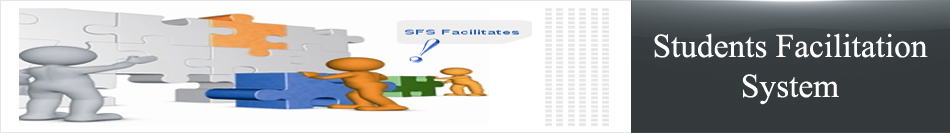
<style>
.page{position:relative;width:950px;height:133px;background:#ffffff}
.page>*{position:absolute;margin:0}
.t1{font:33.3px "TimesNewRomanPSMT";color:#ffffff}
</style>
<div class="page">
<p class="t1" style="left:654px;top:33px;width:274px;height:72px;text-align:center">Students Facilitation<br>System</p>
</div>
